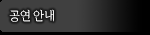
<style>
.page{position:relative;width:150px;height:35px;background:#404040}
.page>*{position:absolute;margin:0}
.t1{font:12px "TSThgrgl";color:#ffffff;scale:0.94 1}
</style>
<div class="page">
<p class="t1" style="left:9px;top:9px;width:45px;height:13px">공연 안내</p>
</div>
